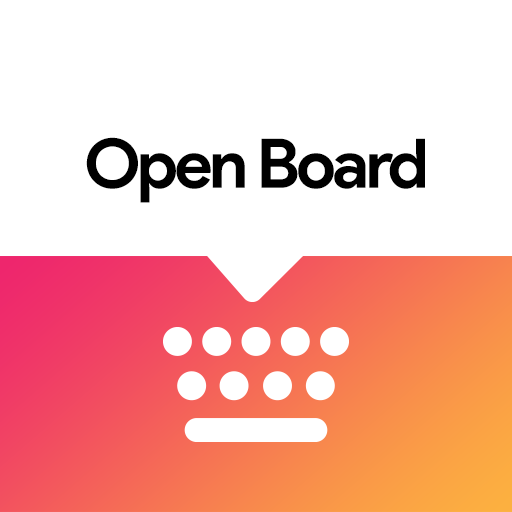
<style>
.page{position:relative;width:512px;height:512px;background:#ffffff}
.page>*{position:absolute;margin:0}
.t1{font:68.5px "ProductSans-Bold";letter-spacing:-0.05em;color:#000000}
</style>
<div class="page">
<p class="t1" style="left:86px;top:137px;width:339px;height:66px">Open Board</p>
</div>
